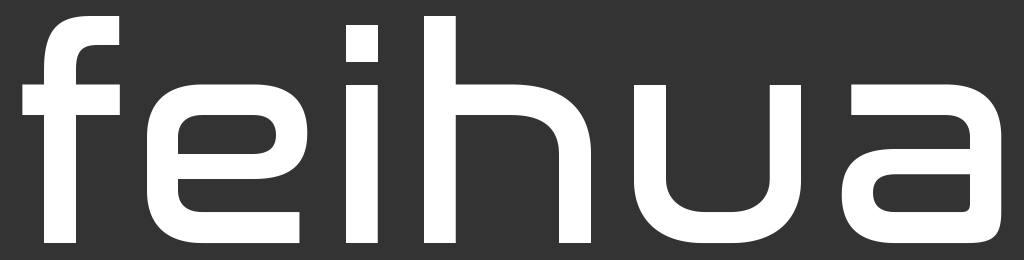
<style>
.page{position:relative;width:1024px;height:260px;background:#333333}
.page>*{position:absolute;margin:0}
.t1{font:300px "NasalizationRg-Regular";color:#ffffff}
</style>
<div class="page">
<p class="t1" style="left:22px;top:16px;width:980px;height:228px">feihua</p>
</div>
